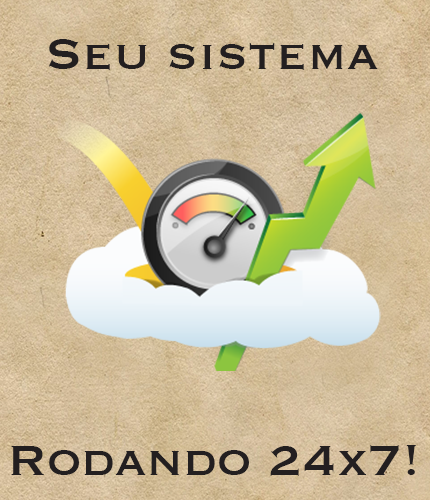
<style>
.page{position:relative;width:430px;height:500px}
.page>*{position:absolute;margin:0}
.t1{font:55.3px "Copperplate";color:#231f20}
</style>
<div class="page">
<p class="t1" style="left:48px;top:39px;width:330px;height:31px">Seu sistema</p>
<p class="t1" style="left:11px;top:445px;width:405px;height:31px">Rodando 24x7!</p>
</div>
